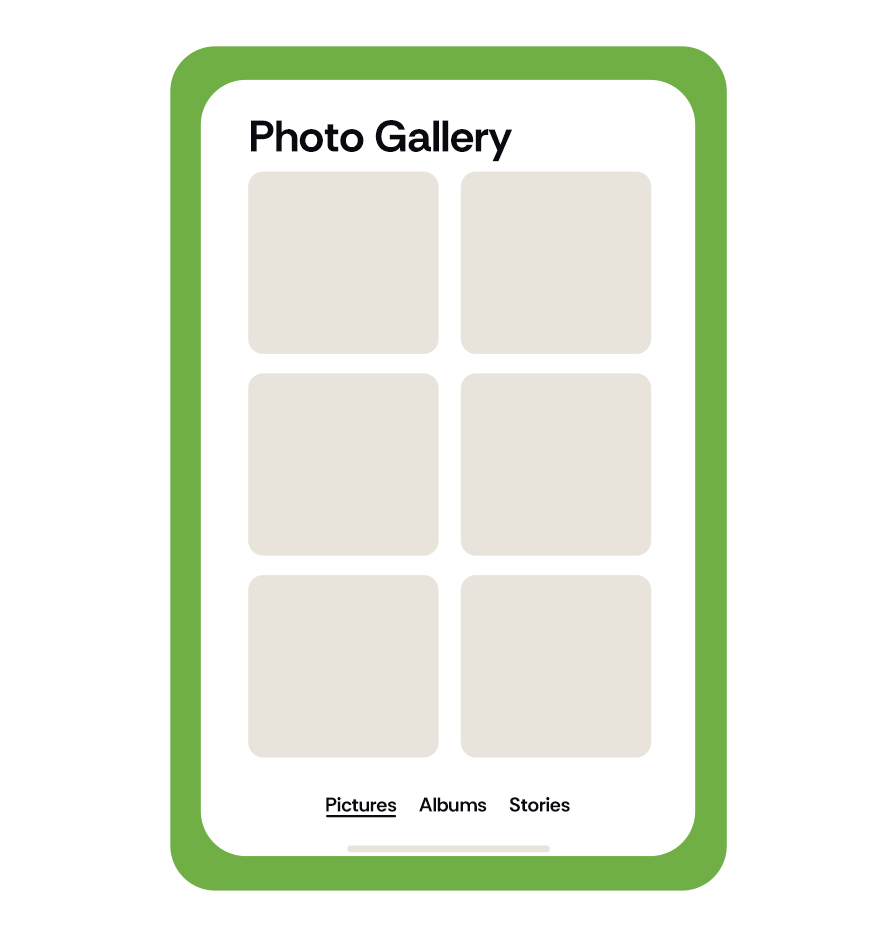
<style>
.page{position:relative;width:896px;height:936px;background:#ffffff}
.page>*{position:absolute;margin:0}
.t1{font:44.2px "RethinkSans-Bold";letter-spacing:-0.01em;color:#090a10}
.t2{font:20px "RethinkSans-Bold";letter-spacing:-0.01em;color:#090a10}
</style>
<div class="page">
<p class="t1" style="left:251px;top:120px;width:262px;height:42px">Photo Gallery</p>
<p class="t2" style="left:326px;top:797px;width:71px;height:15px">Pictures</p>
<p class="t2" style="left:419px;top:797px;width:68px;height:15px">Albums</p>
<p class="t2" style="left:509px;top:797px;width:61px;height:15px">Stories</p>
</div>
